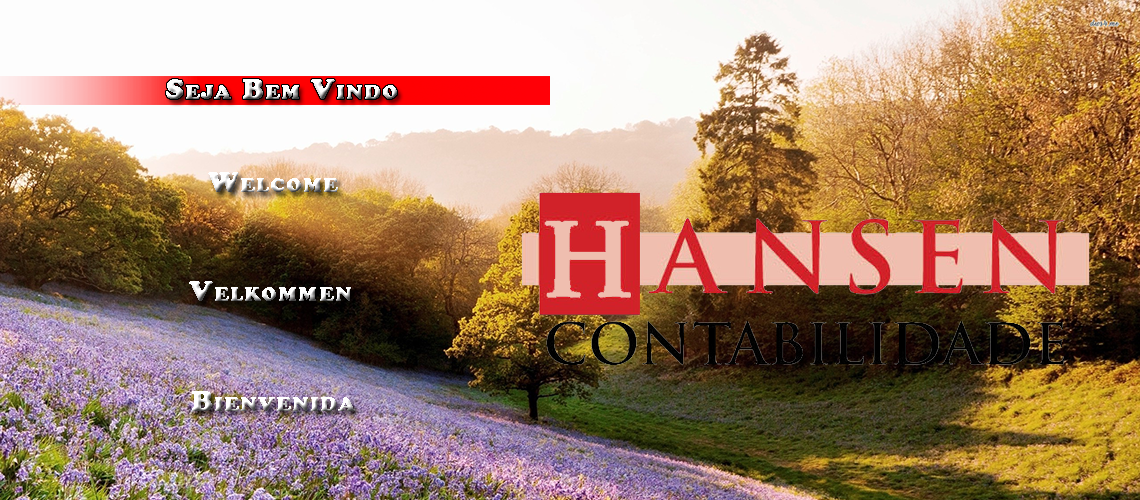
<style>
.page{position:relative;width:1140px;height:500px}
.page>*{position:absolute;margin:0}
.t1{font:30px "CooperBlack";letter-spacing:0.05em;font-variant:small-caps}
</style>
<div class="page">
<p class="t1" style="left:166px;top:79px;width:231px;height:20px">Seja Bem Vindo</p>
<p class="t1" style="left:208px;top:172px;width:130px;height:20px">Welcome</p>
<p class="t1" style="left:189px;top:281px;width:162px;height:20px">Velkommen</p>
<p class="t1" style="left:192px;top:391px;width:163px;height:20px">Bienvenida</p>
</div>
